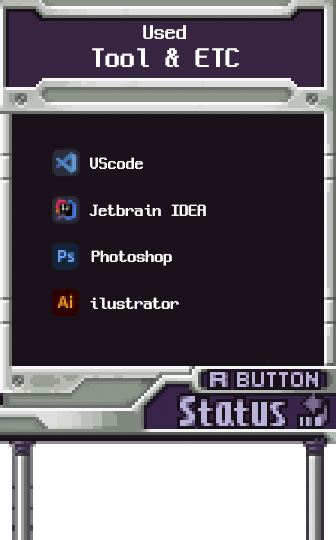
<style>
.page{position:relative;width:336px;height:540px}
.page>*{position:absolute;margin:0}
.t1{font:30px/30px "NeoDunggeunmo-Regular";color:#ffffff}
.t2{font:22px/22px "NeoDunggeunmo-Regular";color:#ffffff}
.t3{font:18px "NeoDunggeunmo-Regular";color:#ffffff}
</style>
<div class="page">
<p class="t1" style="left:92px;top:25px;width:147px;height:42px;text-align:center"><span class="t2">Used<br></span>Tool &amp; ETC</p>
<p class="t3" style="left:90px;top:157px;width:53px;height:12px">VScode</p>
<p class="t3" style="left:89px;top:204px;width:117px;height:12px">Jetbrain IDEA</p>
<p class="t3" style="left:91px;top:250px;width:81px;height:16px">Photoshop</p>
<p class="t3" style="left:90px;top:297px;width:89px;height:12px">ilustrator</p>
</div>
